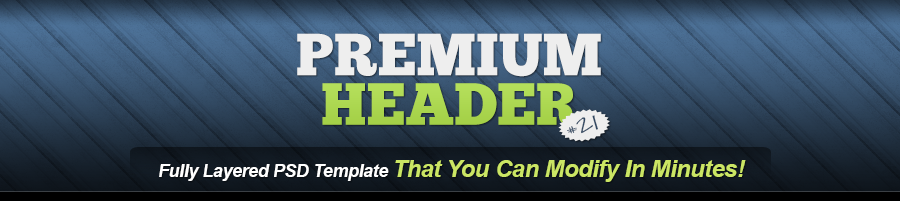
<style>
.page{position:relative;width:900px;height:201px}
.page>*{position:absolute;margin:0}
.t1{font:59.3px "ChunkFive";color:#eeeeee;text-transform:uppercase}
.t2{font:59.3px "ChunkFive";color:#add852;text-transform:uppercase}
.t3{font:14px "JennaSue";letter-spacing:-0.025em;scale:1.65 1}
.t4{font:24.9px "JennaSue";letter-spacing:-0.025em;color:#304761;scale:1.65 1}
.t5{font:24px "Arial-BoldItalicMT";letter-spacing:-0.025em;color:#cbe664}
.t6{font:18px "Arial-BoldItalicMT";letter-spacing:-0.025em;color:#ffffff}
</style>
<div class="page">
<p class="t1" style="left:297px;top:33px;width:304px;height:44px">Premium</p>
<p class="t2" style="left:322px;top:83px;width:257px;height:43px">Header</p>
<p class="t3" style="left:567px;top:126px;width:10px;height:8px;rotate:-9deg">#</p>
<p class="t4" style="left:576px;top:115px;width:22px;height:19px;rotate:-9deg">21</p>
<p class="t5" style="left:159px;top:160px;width:587px;height:22px"><span class="t6">Fully Layered PSD Template </span>That You Can Modify In Minutes!</p>
</div>
